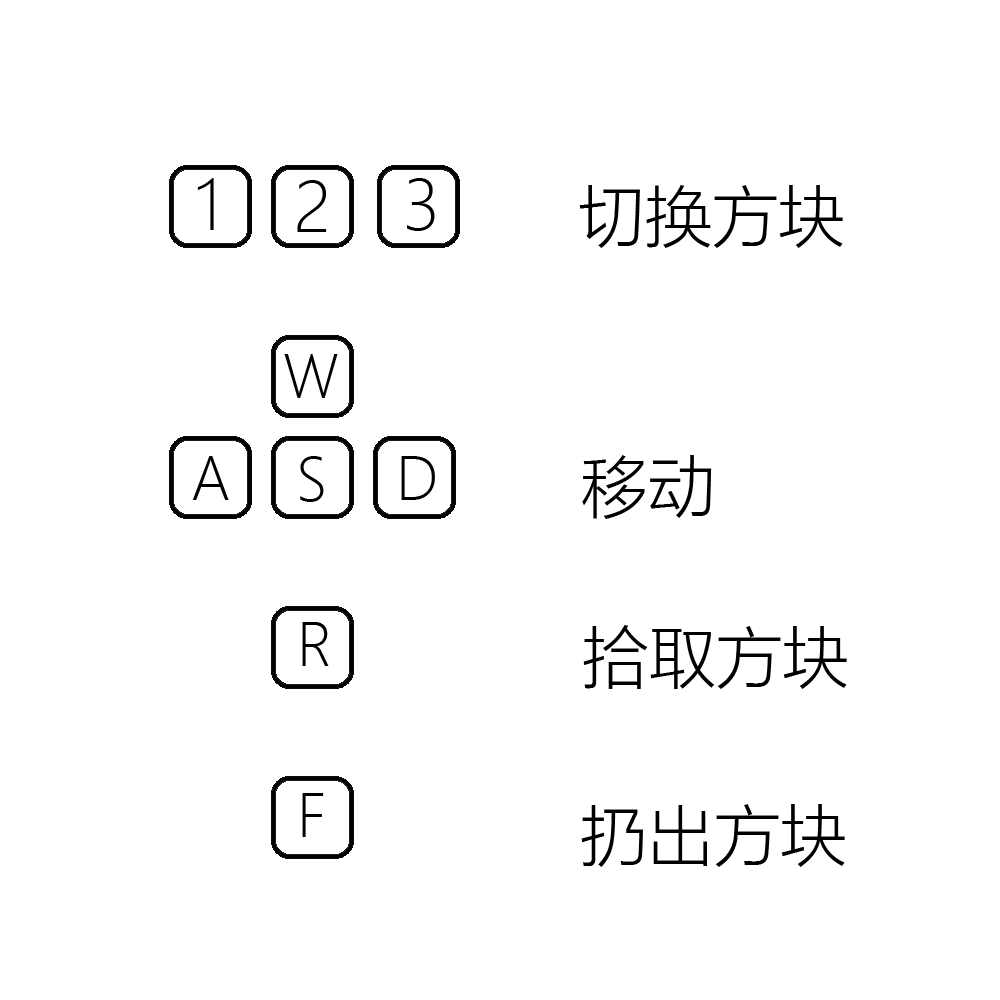
<style>
.page{position:relative;width:1000px;height:1000px;background:#ffffff}
.page>*{position:absolute;margin:0}
.t1{font:66.7px "MicrosoftYaHeiLight";color:#000000}
.t2{font:58.3px "MicrosoftYaHeiLight";color:#000000}
</style>
<div class="page">
<p class="t1" style="left:197px;top:178px;width:17px;height:52px">1</p>
<p class="t1" style="left:297px;top:180px;width:30px;height:52px">2</p>
<p class="t1" style="left:407px;top:178px;width:28px;height:53px">3</p>
<p class="t1" style="left:579px;top:185px;width:264px;height:63px">切换方块</p>
<p class="t2" style="left:284px;top:354px;width:54px;height:44px">W</p>
<p class="t2" style="left:192px;top:456px;width:37px;height:44px">A</p>
<p class="t2" style="left:300px;top:456px;width:24px;height:46px">S</p>
<p class="t2" style="left:401px;top:456px;width:34px;height:44px">D</p>
<p class="t1" style="left:582px;top:455px;width:130px;height:64px">移动</p>
<p class="t2" style="left:302px;top:622px;width:27px;height:44px">R</p>
<p class="t1" style="left:583px;top:625px;width:264px;height:64px">拾取方块</p>
<p class="t2" style="left:302px;top:793px;width:22px;height:44px">F</p>
<p class="t1" style="left:581px;top:804px;width:264px;height:63px">扔出方块</p>
</div>
